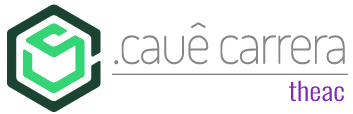
<style>
.page{position:relative;width:353px;height:114px;background:#ffffff}
.page>*{position:absolute;margin:0}
.t1{font:60px "Dosis-ExtraLight";letter-spacing:-0.034em;color:#878787;scale:0.93 1}
.t2{font:25px "Oswald-Light";color:#8127b9;scale:1.21 1}
</style>
<div class="page">
<p class="t1" style="left:114px;top:22px;width:231px;height:43px">.cauê carrera</p>
<p class="t2" style="left:288px;top:80px;width:56px;height:22px">theac</p>
</div>
